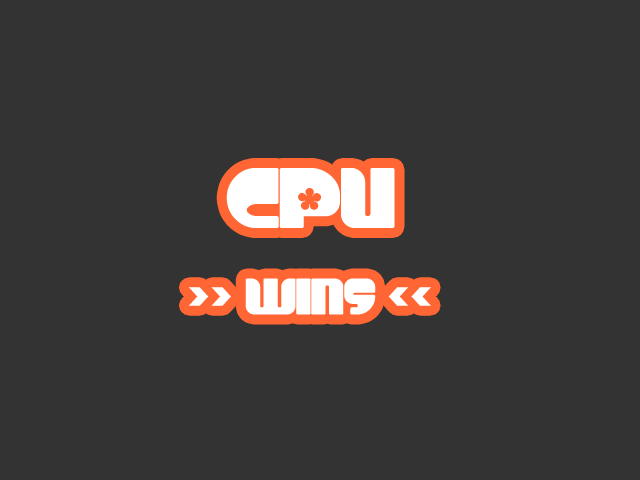
<style>
.page{position:relative;width:640px;height:480px;background:#333333}
.page>*{position:absolute;margin:0}
.t1{font:72px "Chick";color:#ffffff}
.t2{font:120px "Chick";color:#ffffff}
</style>
<div class="page">
<p class="t1" style="left:188px;top:168px;width:243px;height:147px;text-align:center"><span class="t2">CPU<br></span>&gt;&gt; WINS &lt;&lt;</p>
</div>
